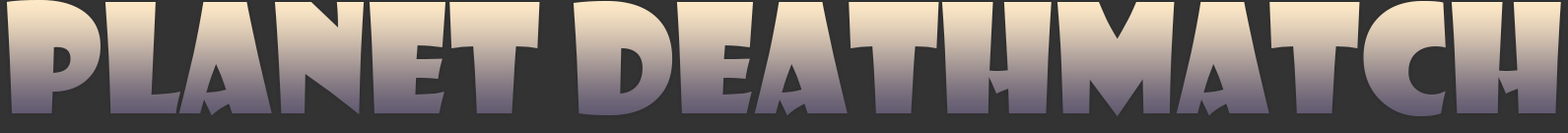
<style>
.page{position:relative;width:1568px;height:133px;background:#333333}
.page>*{position:absolute;margin:0}
.t1{font:147.8px "ShowcardGothic-Reg"}
</style>
<div class="page">
<p class="t1" style="left:6px;top:0px;width:1555px;height:116px">PLANET DEATHMATCH</p>
</div>
